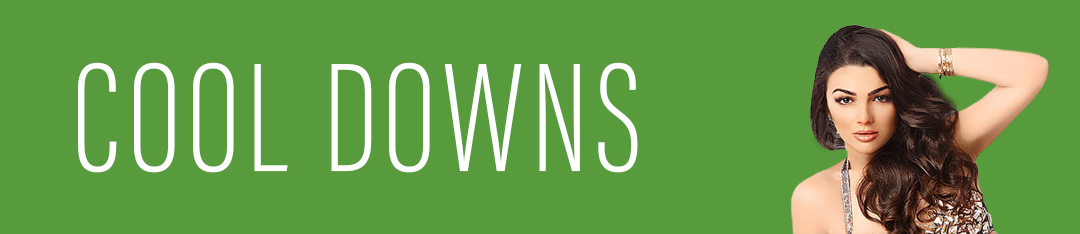
<style>
.page{position:relative;width:1080px;height:234px;background:#589b3c}
.page>*{position:absolute;margin:0}
.t1{font:160px "AcuminConcept-ExtraCondensedExtraLight";letter-spacing:0.04em;color:#ffffff}
</style>
<div class="page">
<p class="t1" style="left:78px;top:62px;width:560px;height:111px">COOL DOWNS</p>
</div>
